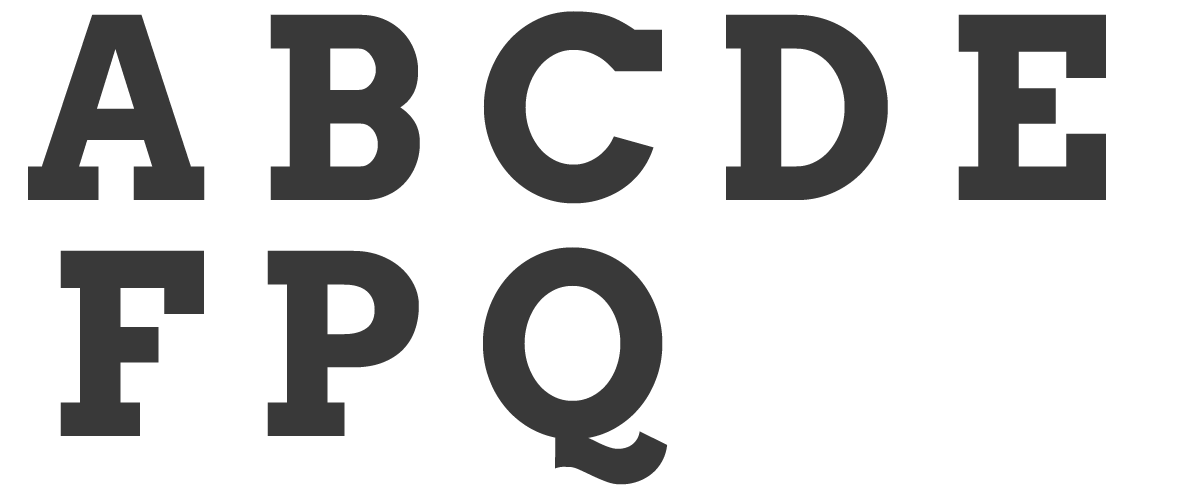
<style>
.page{position:relative;width:1200px;height:500px;background:#ffffff}
.page>*{position:absolute;margin:0}
.t1{font:250px "Arvo-Bold";color:#393939}
</style>
<div class="page">
<p class="t1" style="left:28px;top:11px;width:1078px;height:193px">A B C D E</p>
<p class="t1" style="left:60px;top:247px;width:608px;height:238px">F P Q</p>
</div>
